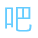
<style>
.page{position:relative;width:38px;height:38px;background:#ffffff}
.page>*{position:absolute;margin:0}
.t1{font:30px "HiraginoSansGB-W3";color:#66ccff}
</style>
<div class="page">
<p class="t1" style="left:5px;top:6px;width:27px;height:26px">吧</p>
</div>
